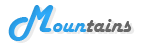
<style>
.page{position:relative;width:141px;height:47px;background:#ffffff}
.page>*{position:absolute;margin:0}
.t1{font:24px "HarlowSolid";color:#727272}
.t2{font:40px "HarlowSolid";color:#2faeff}
.t3{font:24px "HarlowSolid";color:#2faeff}
</style>
<div class="page">
<p class="t1" style="left:8px;top:5px;width:124px;height:36px"><span class="t2">M</span><span class="t3">oun</span>tains</p>
</div>
